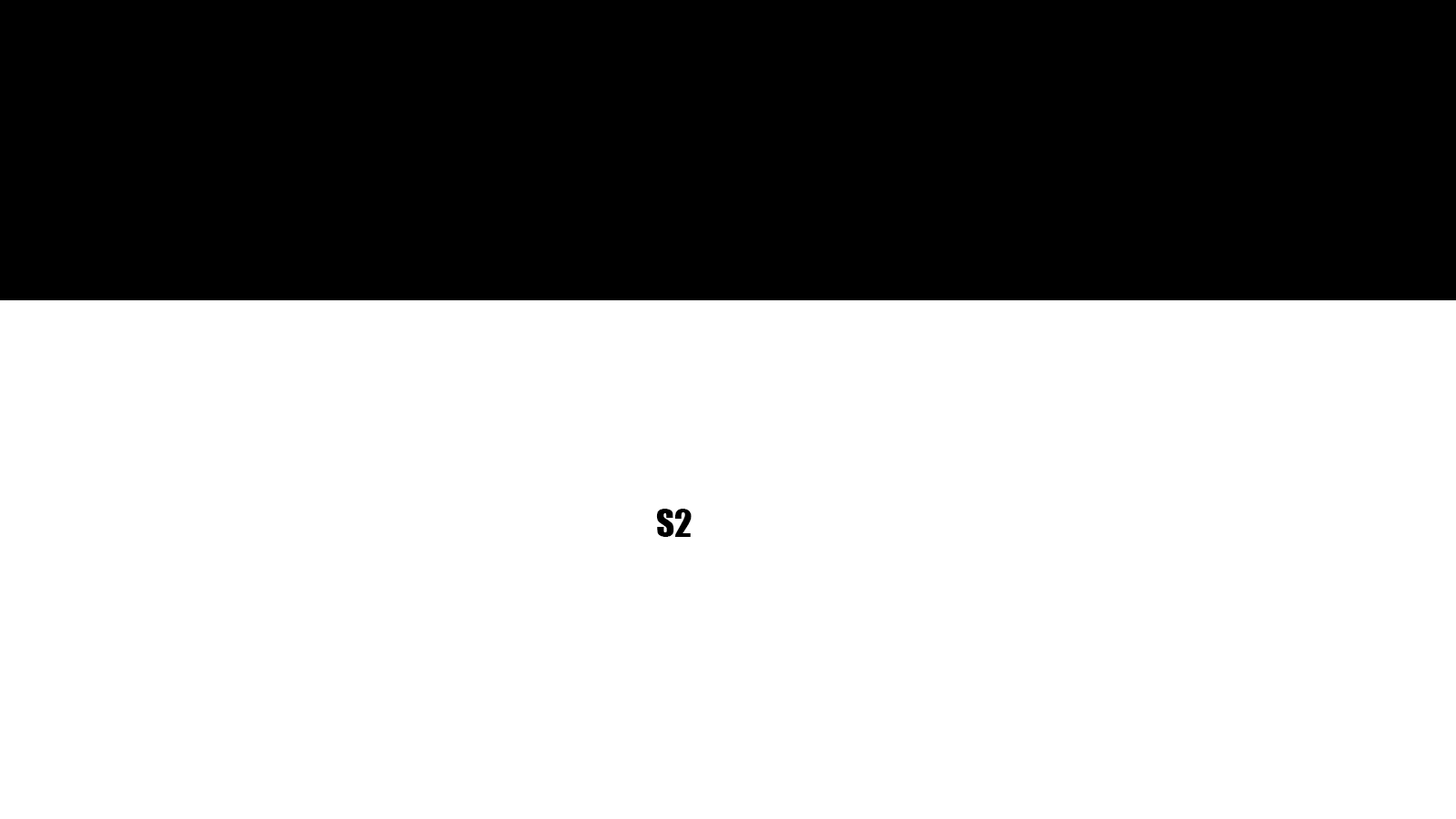
<style>
.page{position:relative;width:1456px;height:819px;background:#ffffff}
.page>*{position:absolute;margin:0}
.t1{font:35.4px "Impact";color:#000000}
</style>
<div class="page">
<p class="t1" style="left:656px;top:509px;width:36px;height:28px">S2</p>
</div>
